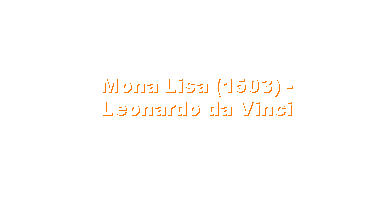
<style>
.page{position:relative;width:391px;height:200px;background:#ffffff}
.page>*{position:absolute;margin:0}
.t1{font:19px "Arial-Black";color:#ffffff}
</style>
<div class="page">
<p class="t1" style="left:103px;top:79px;width:190px;height:37px;text-align:center">Mona Lisa (1503) - Leonardo da Vinci</p>
</div>
